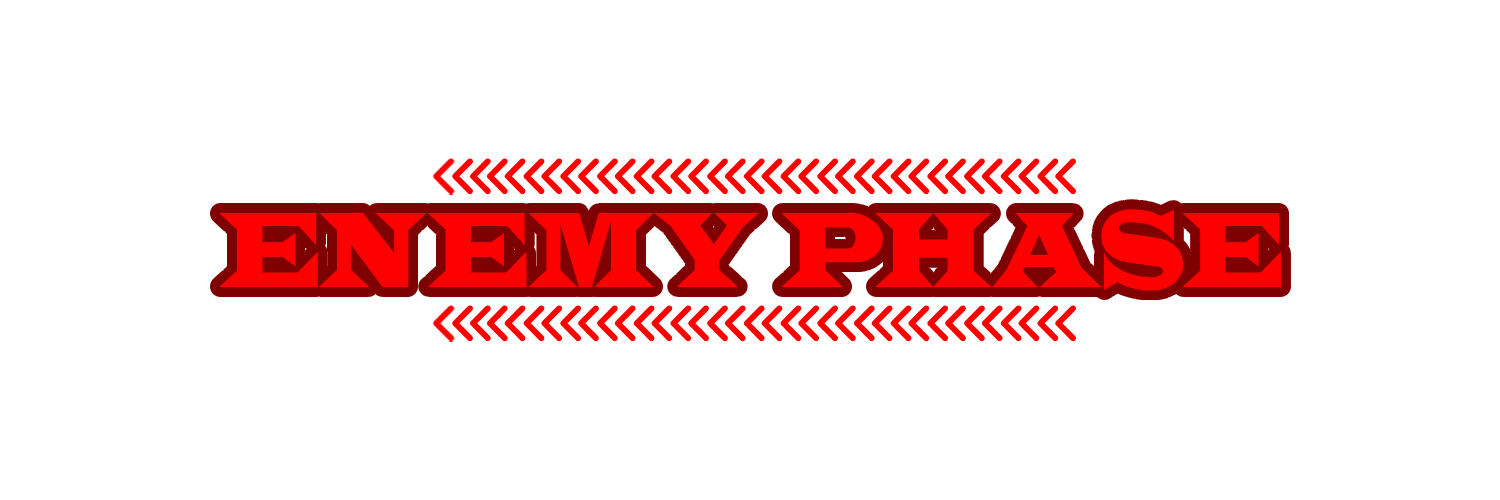
<style>
.page{position:relative;width:1500px;height:500px;background:#ffffff}
.page>*{position:absolute;margin:0}
.t1{font:111px "Indubitably";color:#ff0000}
</style>
<div class="page">
<p class="t1" style="left:219px;top:209px;width:1062px;height:82px">ENEMY PHASE</p>
</div>
